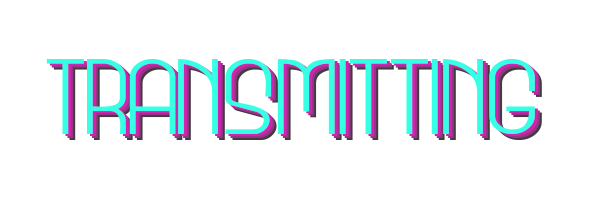
<style>
.page{position:relative;width:600px;height:200px;background:#ffffff}
.page>*{position:absolute;margin:0}
.t1{font:100px "BeautySchoolDropout";color:#35ffe5;scale:1.25 1}
.t2{font:100px "BeautySchoolDropout";color:#d024b2;scale:1.25 1}
.t3{font:100px "BeautySchoolDropout";color:#993287;scale:1.25 1}
.t4{font:100px "BeautySchoolDropout";color:#443b42;scale:1.25 1}
</style>
<div class="page">
<p class="t1" style="left:46px;top:59px;width:489px;height:75px">TRANSMITTING</p>
<p class="t2" style="left:49px;top:61px;width:489px;height:75px">TRANSMITTING</p>
<p class="t3" style="left:51px;top:63px;width:489px;height:75px">TRANSMITTING</p>
<p class="t4" style="left:53px;top:65px;width:489px;height:75px">TRANSMITTING</p>
</div>
